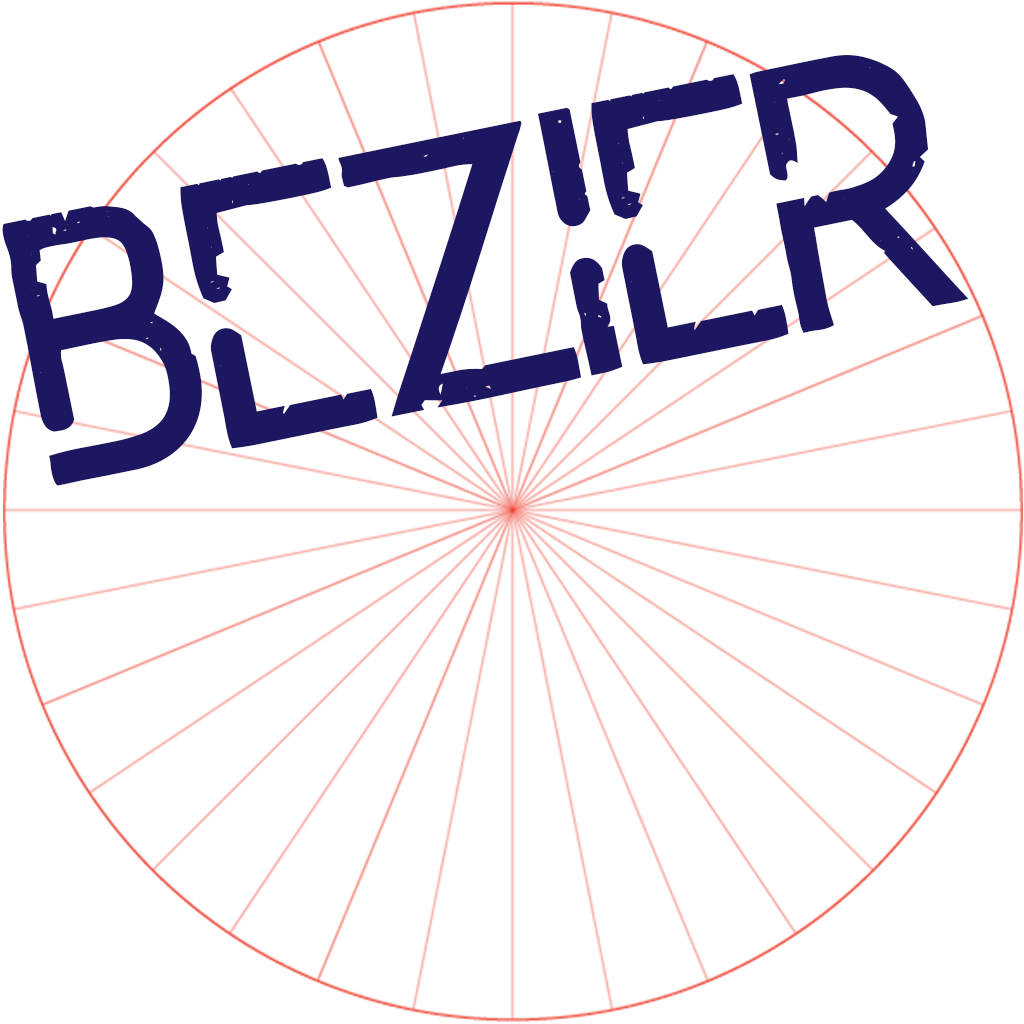
<style>
.page{position:relative;width:1024px;height:1024px;background:#ffffff}
.page>*{position:absolute;margin:0}
.t1{font:336.1px "Mechanization";color:#1d1762}
</style>
<div class="page">
<p class="t1" style="left:2px;top:55px;width:967px;height:431px;rotate:-12deg">BEZIER</p>
</div>
